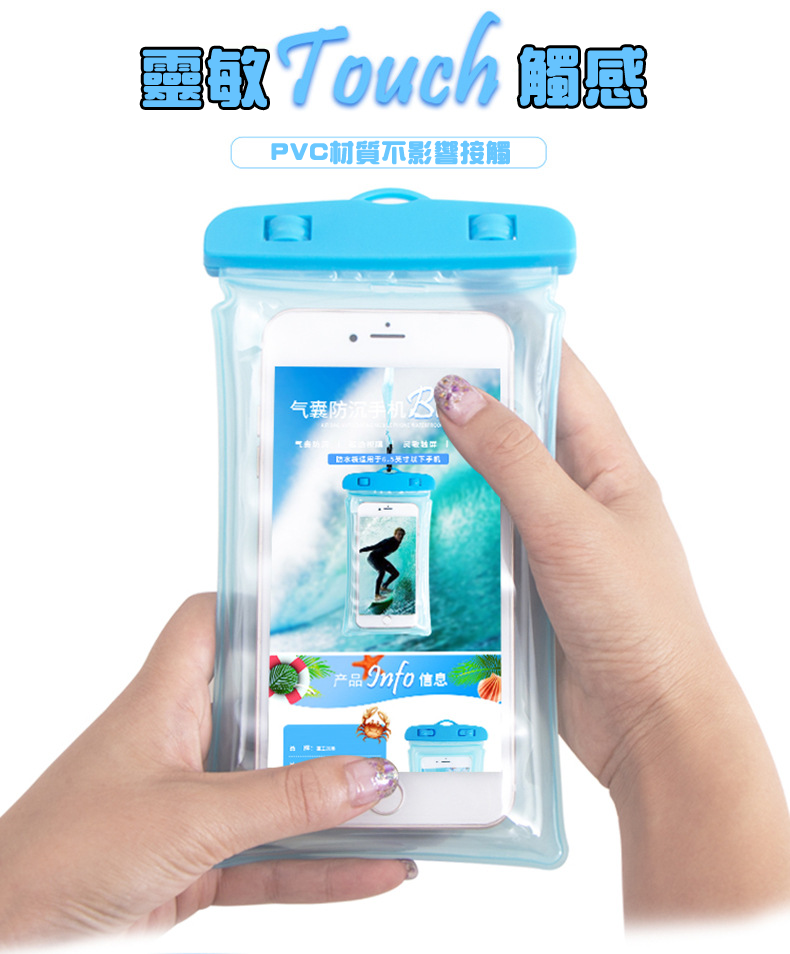
<style>
.page{position:relative;width:790px;height:954px;background:#ffffff}
.page>*{position:absolute;margin:0}
.t1{font:60px "HanWangZonYi";letter-spacing:0.05em;color:#66c3fe;font-weight:bold}
.t2{font:24px "HanWangZonYi";letter-spacing:0.05em;color:#68c7ff;font-weight:bold}
</style>
<div class="page">
<p class="t1" style="left:142px;top:48px;width:125px;height:60px">靈敏</p>
<p class="t1" style="left:519px;top:47px;width:126px;height:59px">觸感</p>
<p class="t2" style="left:271px;top:140px;width:239px;height:25px">PVC材質不影響接觸</p>
</div>
